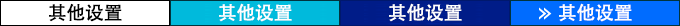
<style>
.page{position:relative;width:680px;height:26px;background:#ffffff}
.page>*{position:absolute;margin:0}
.t1{font:18.7px "AdobeHeitiStd-Regular";color:#000000}
.t2{font:18.7px "AdobeHeitiStd-Regular";color:#ffffff}
</style>
<div class="page">
<p class="t1" style="left:49px;top:3px;width:73px;height:19px">其他设置</p>
<p class="t2" style="left:219px;top:3px;width:73px;height:19px">其他设置</p>
<p class="t2" style="left:389px;top:3px;width:73px;height:19px">其他设置</p>
<p class="t2" style="left:559px;top:3px;width:73px;height:19px">其他设置</p>
</div>
